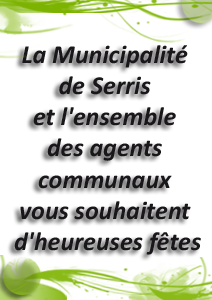
<style>
.page{position:relative;width:212px;height:300px;background:#ffffff}
.page>*{position:absolute;margin:0}
.t1{font:26px "Calibri-BoldItalic";color:#1a171b}
</style>
<div class="page">
<p class="t1" style="left:14px;top:45px;width:187px;height:210px;text-align:center">La Municipalité<br>de Serris<br>et l'ensemble<br>des agents<br>communaux<br>vous souhaitent<br> d'heureuses fêtes</p>
</div>
